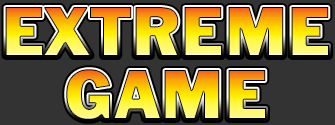
<style>
.page{position:relative;width:335px;height:125px;background:#333333}
.page>*{position:absolute;margin:0}
.t1{font:72px "FranklinGotT-Regu";font-weight:bold}
</style>
<div class="page">
<p class="t1" style="left:5px;top:7px;width:324px;height:49px">EXTREME</p>
<p class="t1" style="left:66px;top:69px;width:200px;height:51px">GAME</p>
</div>
